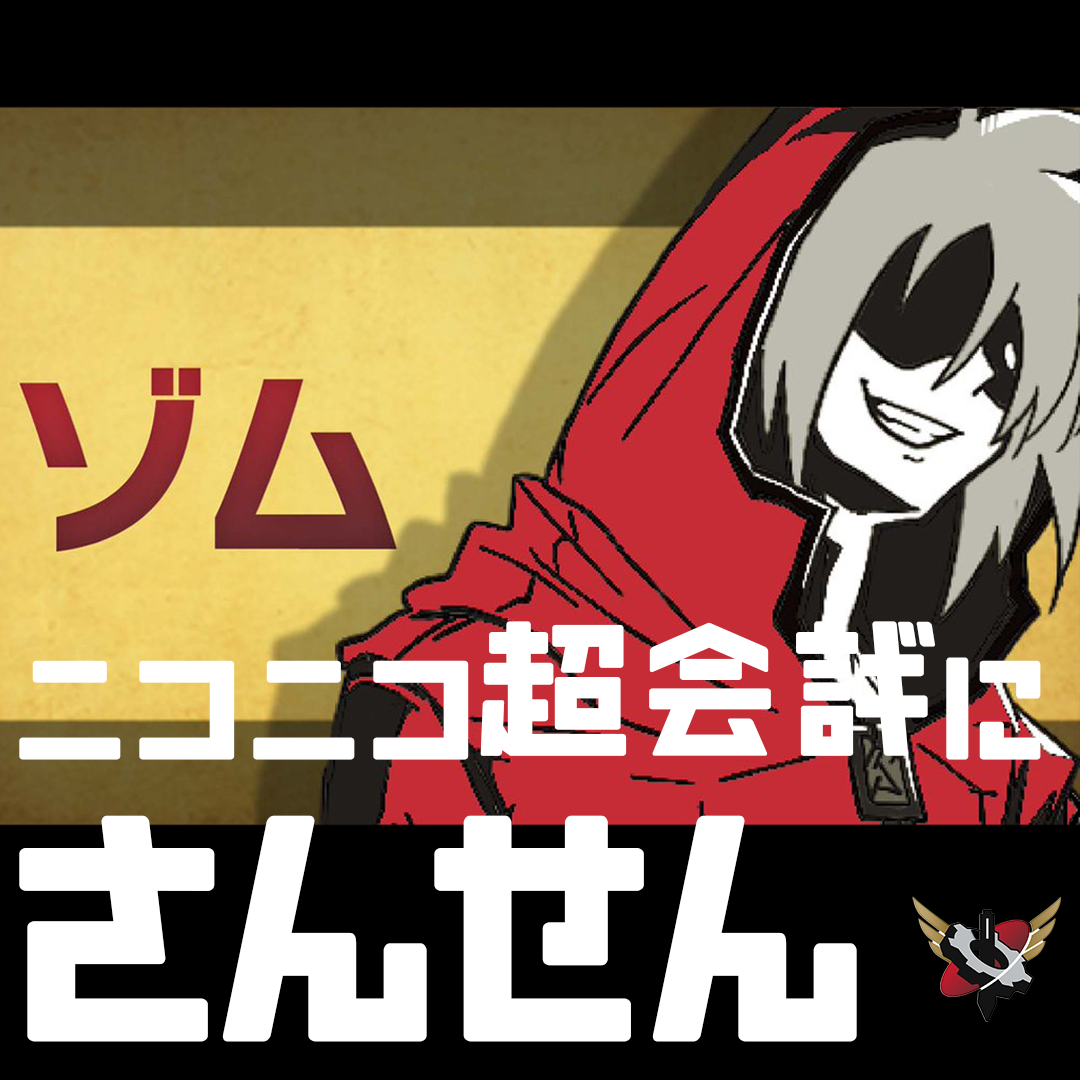
<style>
.page{position:relative;width:1080px;height:1080px;background:#000000}
.page>*{position:absolute;margin:0}
.t1{font:153.2px "Nikkyou-Sans";color:#ffffff}
.t2{font:300px "Nikkyou-Sans";color:#ffffff}
</style>
<div class="page">
<p class="t1" style="left:19px;top:621px;width:1022px;height:139px">ニコニコ超会議に</p>
<p class="t2" style="left:19px;top:815px;width:838px;height:227px">さんせん</p>
</div>
